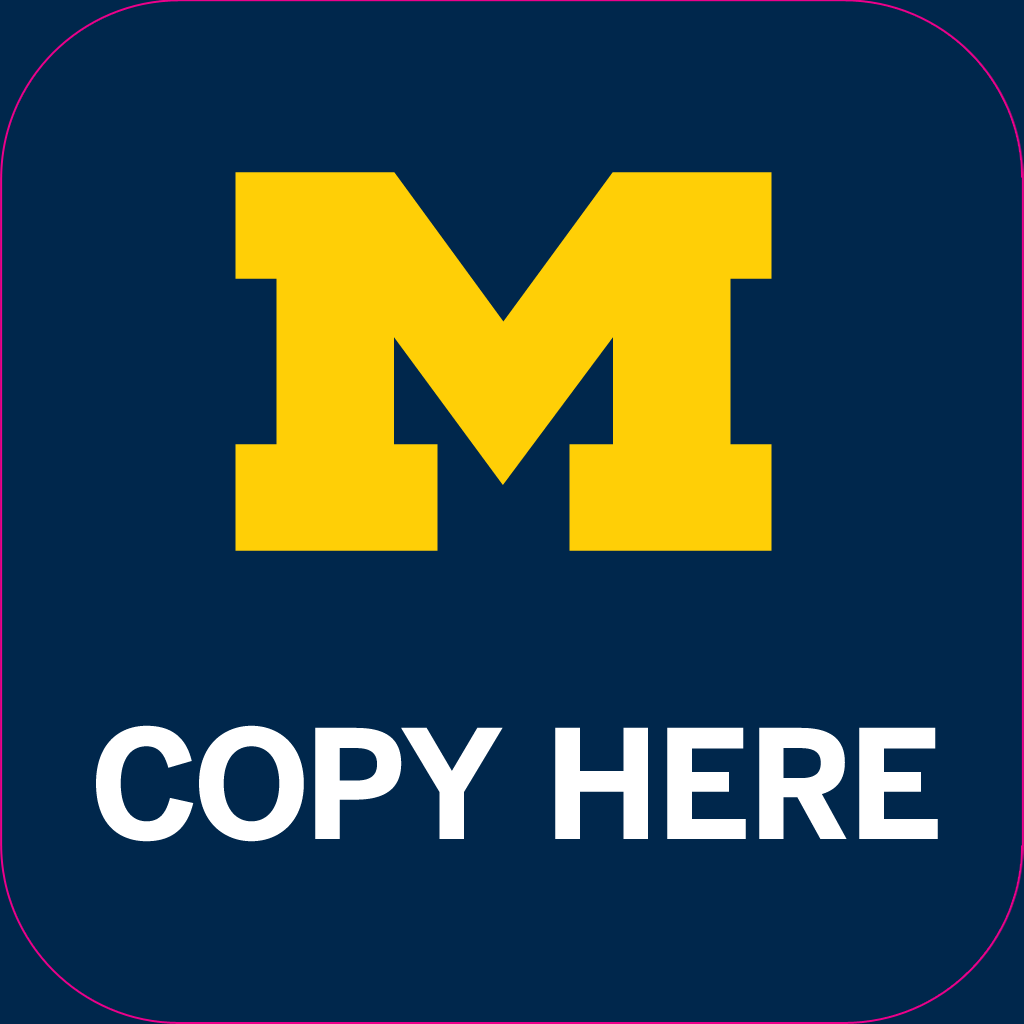
<style>
.page{position:relative;width:1024px;height:1024px;background:#00274c}
.page>*{position:absolute;margin:0}
.t1{font:150px "BentonSans-Bold";color:#ffffff;text-transform:uppercase}
</style>
<div class="page">
<p class="t1" style="left:96px;top:725px;width:842px;height:117px">copy here</p>
</div>
